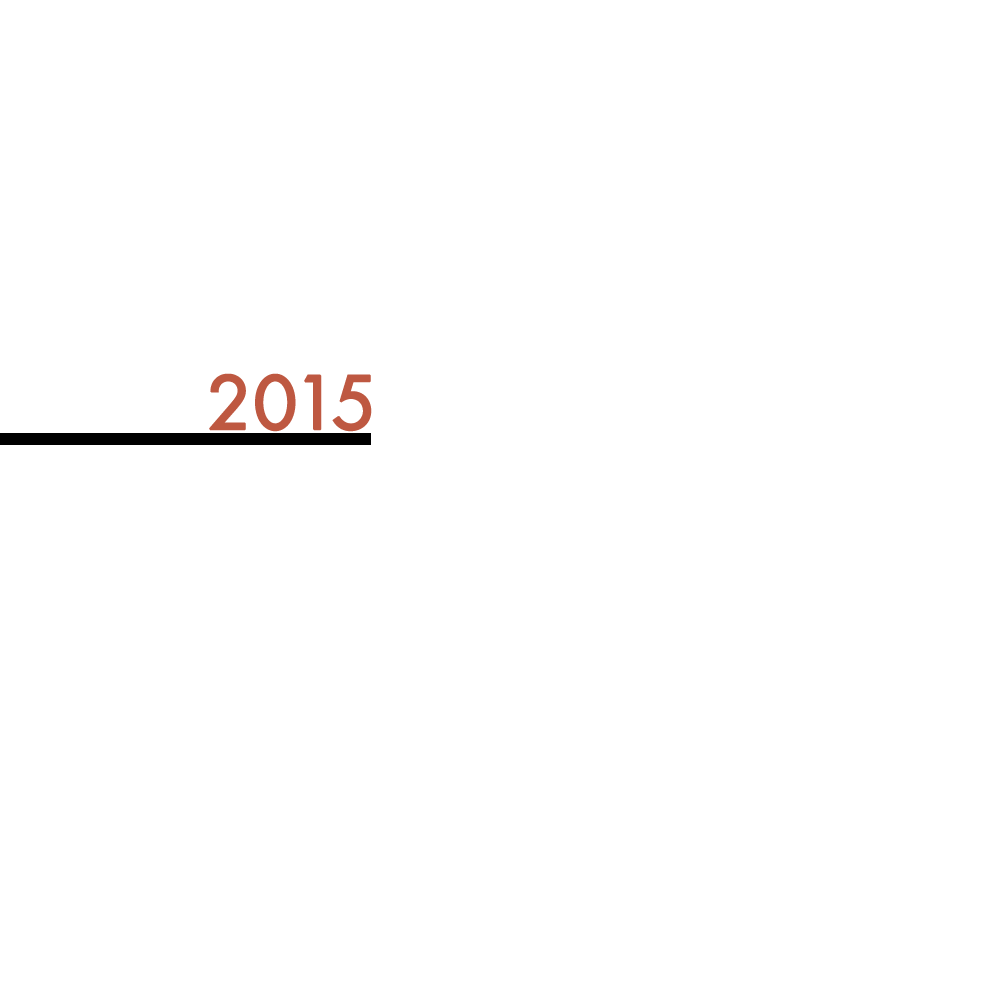
<style>
.page{position:relative;width:1000px;height:1000px;background:#ffffff}
.page>*{position:absolute;margin:0}
.t1{font:80px "FuturaPT-Book";letter-spacing:0.01em;color:#be5841;font-weight:bold}
</style>
<div class="page">
<p class="t1" style="left:209px;top:373px;width:163px;height:59px">2015</p>
</div>
